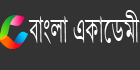
<style>
.page{position:relative;width:140px;height:70px;background:#333333}
.page>*{position:absolute;margin:0}
.t1{font:42px "ShonarBangla";color:#ffffff;scale:0.58 1}
</style>
<div class="page">
<p class="t1" style="left:28px;top:10px;width:112px;height:34px">বাংলা একােডমী</p>
</div>
